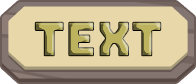
<style>
.page{position:relative;width:196px;height:84px;background:#e8d8a9}
.page>*{position:absolute;margin:0}
.t1{font:48px "Bungee-Regular"}
</style>
<div class="page">
<p class="t1" style="left:34px;top:21px;width:128px;height:36px">text</p>
</div>
